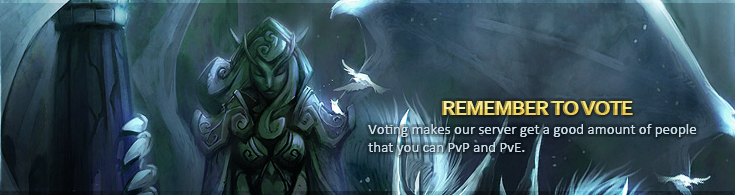
<style>
.page{position:relative;width:735px;height:195px}
.page>*{position:absolute;margin:0}
.t1{font:22px "Corbel-Bold";letter-spacing:-0.05em;text-transform:uppercase}
.t2{font:15px "Calibri";color:#c8deeb}
</style>
<div class="page">
<p class="t1" style="left:442px;top:101px;width:189px;height:14px">remember to vote</p>
<p class="t1" style="left:444px;top:101px;width:189px;height:14px">remember to vote</p>
<p class="t2" style="left:368px;top:124px;width:329px;height:31px">Voting makes our server get a good amount of people that you can PvP and PvE.</p>
<p class="t2" style="left:368px;top:124px;width:329px;height:31px">Voting makes our server get a good amount of people that you can PvP and PvE.</p>
</div>
